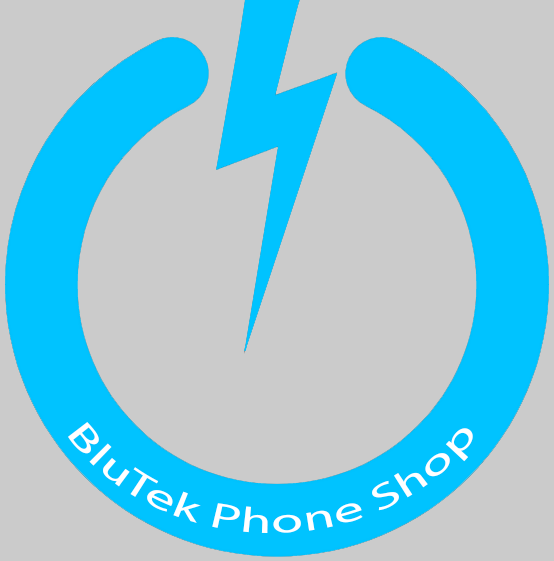
<style>
.page{position:relative;width:554px;height:561px;background:#cbcbcb}
.page>*{position:absolute;margin:0}
.t1{font:35.2px "MyriadPro-Regular";color:#ffffff}
</style>
<div class="page">
<p class="t1" style="left:68px;top:422px;width:405px;height:111px;text-align:center">BluTek Phone Shop</p>
</div>
